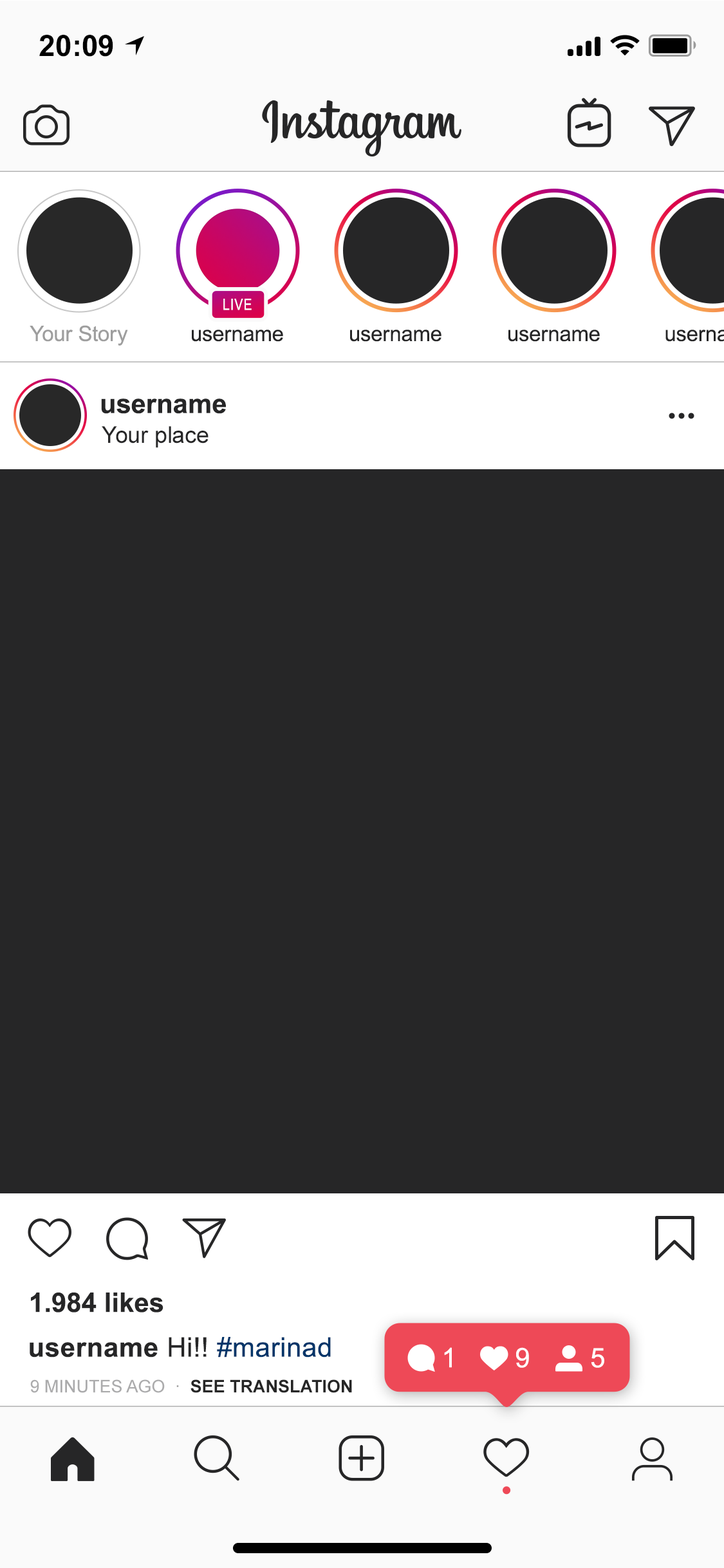
<style>
.page{position:relative;width:724px;height:1568px;background:#262627}
.page>*{position:absolute;margin:0}
.t1{font:29.6px "Arial-BoldMT";color:#000000}
.t2{font:15.4px "ArialNarrow";letter-spacing:0.042em;color:#ffffff}
.t3{font:21.2px "ArialMT";color:#9e9e9e}
.t4{font:21.2px "ArialMT";color:#262627}
.t5{font:27px "Arial-BoldMT";color:#262627}
.t6{font:23.2px "ArialMT";color:#262627}
.t7{font:27px "Arial-BoldMT";letter-spacing:0.015em;color:#262627}
.t8{font:27px "ArialMT";letter-spacing:0.015em;color:#262627}
.t9{font:27px "ArialMT";letter-spacing:0.015em;color:#003569}
.t10{font:27px "ArialMT";color:#ffffff}
.t11{font:17.4px "Arial-BoldMT";color:#262626}
.t12{font:17.4px "ArialMT";color:#ababac}
.t13{font:17.4px "ArialMT";color:#9a9a9a}
</style>
<div class="page">
<p class="t1" style="left:39px;top:35px;width:74px;height:22px">20:09</p>
<p class="t2" style="left:223px;top:299px;width:29px;height:11px">LIVE</p>
<p class="t3" style="left:30px;top:325px;width:98px;height:21px">Your Story</p>
<p class="t4" style="left:192px;top:330px;width:91px;height:12px">username</p>
<p class="t4" style="left:350px;top:330px;width:92px;height:12px">username</p>
<p class="t4" style="left:509px;top:330px;width:91px;height:12px">username</p>
<p class="t5" style="left:101px;top:398px;width:125px;height:16px">username</p>
<p class="t6" style="left:102px;top:426px;width:107px;height:22px">Your place</p>
<p class="t5" style="left:31px;top:1293px;width:132px;height:19px">1.984 likes</p>
<p class="t7" style="left:30px;top:1337px;width:301px;height:21px">username<span class="t8"> Hi!! </span><span class="t9">#marinad</span></p>
<p class="t10" style="left:444px;top:1347px;width:8px;height:21px">1</p>
<p class="t10" style="left:516px;top:1347px;width:13px;height:21px">9</p>
<p class="t10" style="left:592px;top:1348px;width:12px;height:20px">5</p>
<p class="t11" style="left:30px;top:1379px;width:322px;height:14px"><span class="t12">9 MINUTES AGO  </span><span class="t13">·  </span>SEE TRANSLATION</p>
</div>
